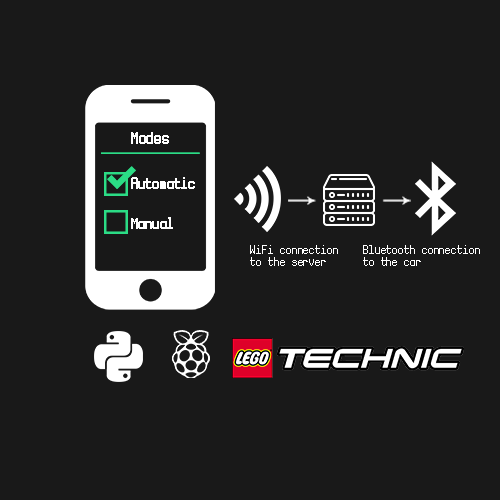
<style>
.page{position:relative;width:500px;height:500px;background:#191919}
.page>*{position:absolute;margin:0}
.t1{font:27.9px "NovaMono";color:#ffffff}
.t2{font:25.7px "NovaMono";color:#ffffff}
.t3{font:20.9px/12.3px "NovaMono";color:#ffffff}
</style>
<div class="page">
<p class="t1" style="left:131px;top:132px;width:38px;height:12px">Modes</p>
<p class="t2" style="left:131px;top:177px;width:64px;height:12px">Automatic</p>
<p class="t2" style="left:131px;top:217px;width:42px;height:12px">Manual</p>
<p class="t3" style="left:250px;top:245px;width:88px;height:21px">WiFi connection<br>to the server</p>
<p class="t3" style="left:363px;top:245px;width:117px;height:21px">Bluetooth connection<br>to the car</p>
</div>
